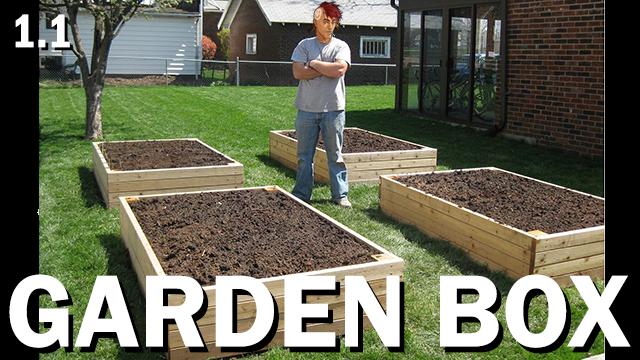
<style>
.page{position:relative;width:640px;height:360px}
.page>*{position:absolute;margin:0}
.t1{font:48px "FranklinGothic-DemiCond";color:#ffffff}
.t2{font:106px "FranklinGothic-Demi";color:#ffffff}
</style>
<div class="page">
<p class="t1" style="left:15px;top:14px;width:55px;height:34px">1.1</p>
<p class="t2" style="left:9px;top:274px;width:622px;height:74px">GARDEN BOX</p>
</div>
